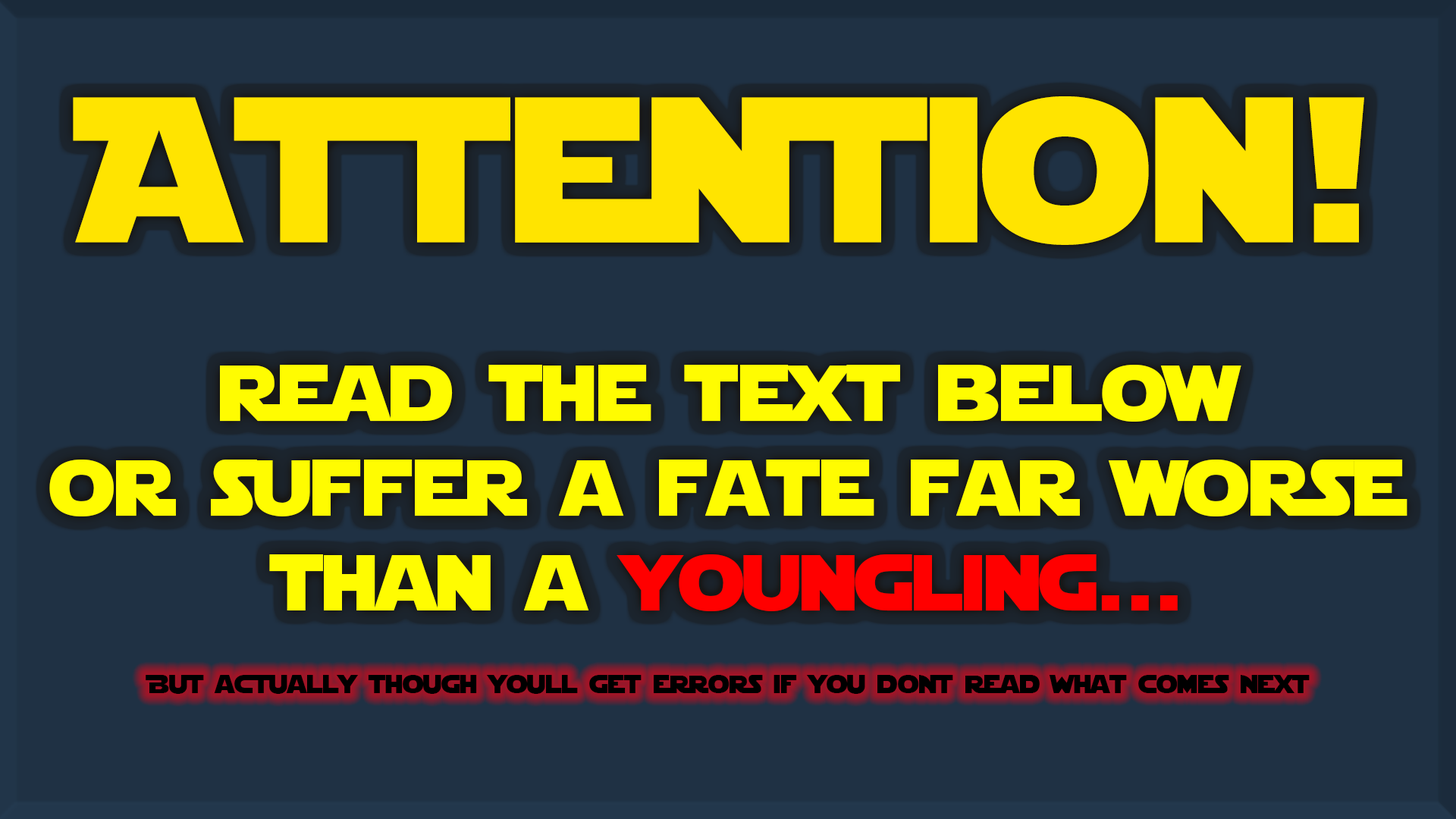
<style>
.page{position:relative;width:1456px;height:819px;background:#1f3144}
.page>*{position:absolute;margin:0}
.t1{font:205.4px "StarJedi";color:#ffe400}
.t2{font:79px "StarJedi";color:#fffc01}
.t3{font:79px "StarJedi";color:#ff0000}
.t4{font:25.3px "StarJediSpecialEdition";color:#000000}
</style>
<div class="page">
<p class="t1" style="left:73px;top:96px;width:1291px;height:149px">Attention!</p>
<p class="t2" style="left:49px;top:365px;width:1358px;height:246px;text-align:center">Read the text below<br>or suffer a fate far worse<br>than a <span class="t3">youngling...</span></p>
<p class="t4" style="left:146px;top:675px;width:1164px;height:19px">But actually though youll get errors if you dont read what comes next</p>
</div>
